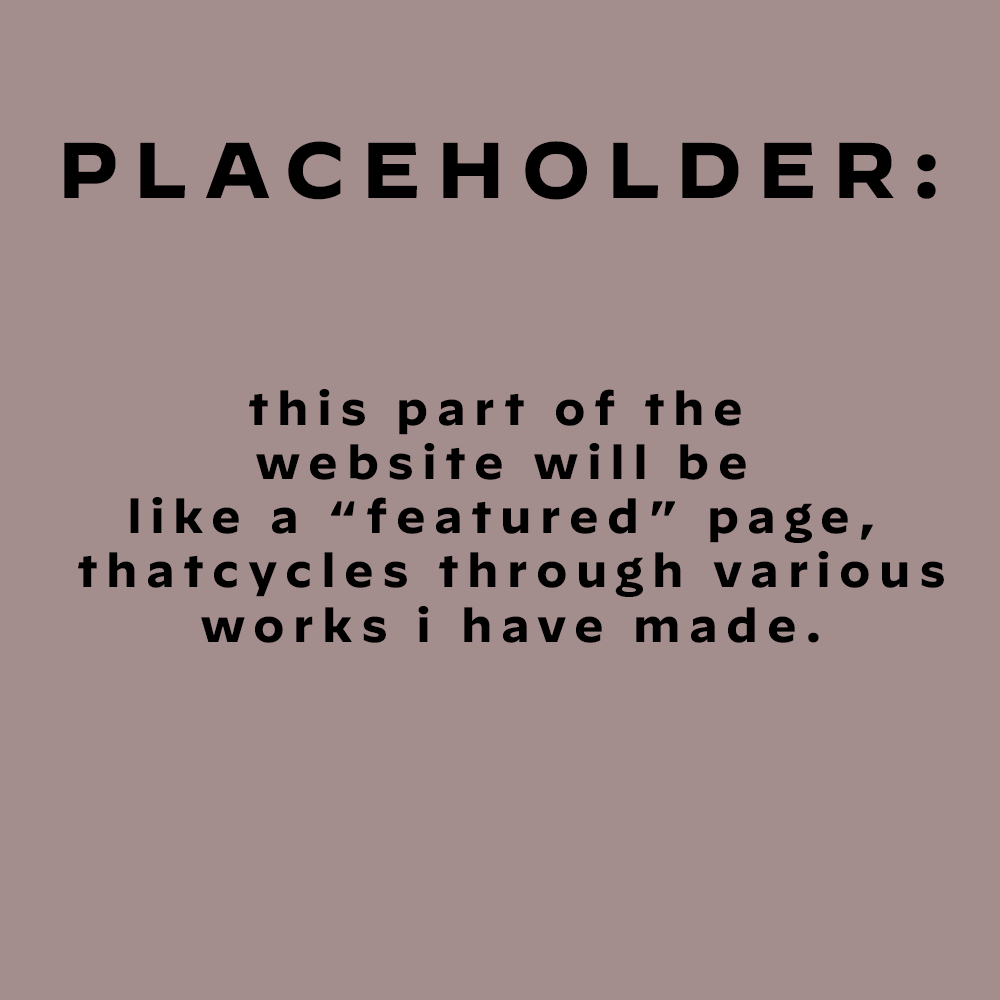
<style>
.page{position:relative;width:1000px;height:1000px;background:#a48d8d}
.page>*{position:absolute;margin:0}
.t1{font:78.8px "Decimal-Bold";letter-spacing:0.2em;color:#000000}
.t2{font:45.2px "Decimal-Bold";letter-spacing:0.2em;color:#000000}
</style>
<div class="page">
<p class="t1" style="left:64px;top:141px;width:872px;height:59px">PLACEHOLDER:</p>
<p class="t2" style="left:78px;top:389px;width:866px;height:254px;text-align:center">this part of the <br>website will be<br>like a “featured” page,<br> thatcycles through various<br> works i have made.</p>
</div>
